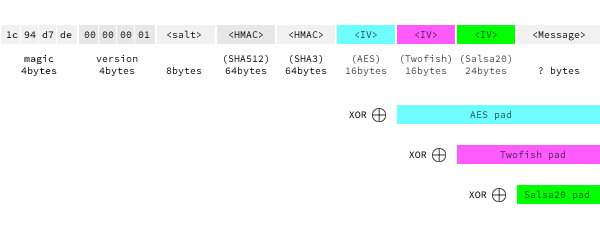
<style>
.page{position:relative;width:600px;height:233px;background:#ffffff}
.page>*{position:absolute;margin:0}
.t1{font:10px "SourceCodePro-Regular"}
.t2{font:10px "SourceCodePro-Regular";color:#000000}
.t3{font:10px "SourceCodePro-Regular";color:#424242}
.t4{font:10px "SourceCodePro-Regular";color:#004c00}
</style>
<div class="page">
<p class="t1" style="left:166px;top:30px;width:36px;height:46px;text-align:center">&lt;salt&gt;<br><br><br>8bytes</p>
<p class="t2" style="left:7px;top:31px;width:65px;height:45px;text-align:center">1c 94 d7 de<br><br>magic<br>4bytes</p>
<p class="t1" style="left:84px;top:31px;width:66px;height:45px;text-align:center">00 00 00 01<br><br>version<br>4bytes</p>
<p class="t2" style="left:224px;top:31px;width:44px;height:45px;text-align:center">&lt;HMAC&gt;<br><br>(SHA512)<br>64bytes</p>
<p class="t1" style="left:285px;top:31px;width:42px;height:45px;text-align:center">&lt;HMAC&gt;<br><br>(SHA3)<br>64bytes</p>
<p class="t1" style="left:346px;top:31px;width:41px;height:45px;text-align:center">&lt;IV&gt;<br><br>(AES)<br>16bytes</p>
<p class="t1" style="left:401px;top:31px;width:50px;height:45px;text-align:center">&lt;IV&gt;<br><br>(Twofish)<br>16bytes</p>
<p class="t3" style="left:461px;top:31px;width:50px;height:45px;text-align:center">&lt;IV&gt;<br><br>(Salsa20)<br>24bytes</p>
<p class="t1" style="left:533px;top:31px;width:52px;height:45px;text-align:center">&lt;Message&gt;<br><br><br>? bytes</p>
<p class="t1" style="left:349px;top:111px;width:18px;height:7px">XOR</p>
<p class="t1" style="left:470px;top:110px;width:41px;height:10px">AES pad</p>
<p class="t1" style="left:500px;top:150px;width:65px;height:10px">Twofish pad</p>
<p class="t1" style="left:409px;top:151px;width:18px;height:7px">XOR</p>
<p class="t1" style="left:469px;top:191px;width:18px;height:7px">XOR</p>
<p class="t4" style="left:524px;top:190px;width:65px;height:10px">Salsa20 pad</p>
</div>
